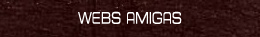
<style>
.page{position:relative;width:260px;height:37px}
.page>*{position:absolute;margin:0}
.t1{font:16px "ESL-eSport-Ext-Light";color:#ffffff;scale:0.64 1}
</style>
<div class="page">
<p class="t1" style="left:78px;top:11px;width:104px;height:13px">WEBS AMIGAS</p>
</div>
